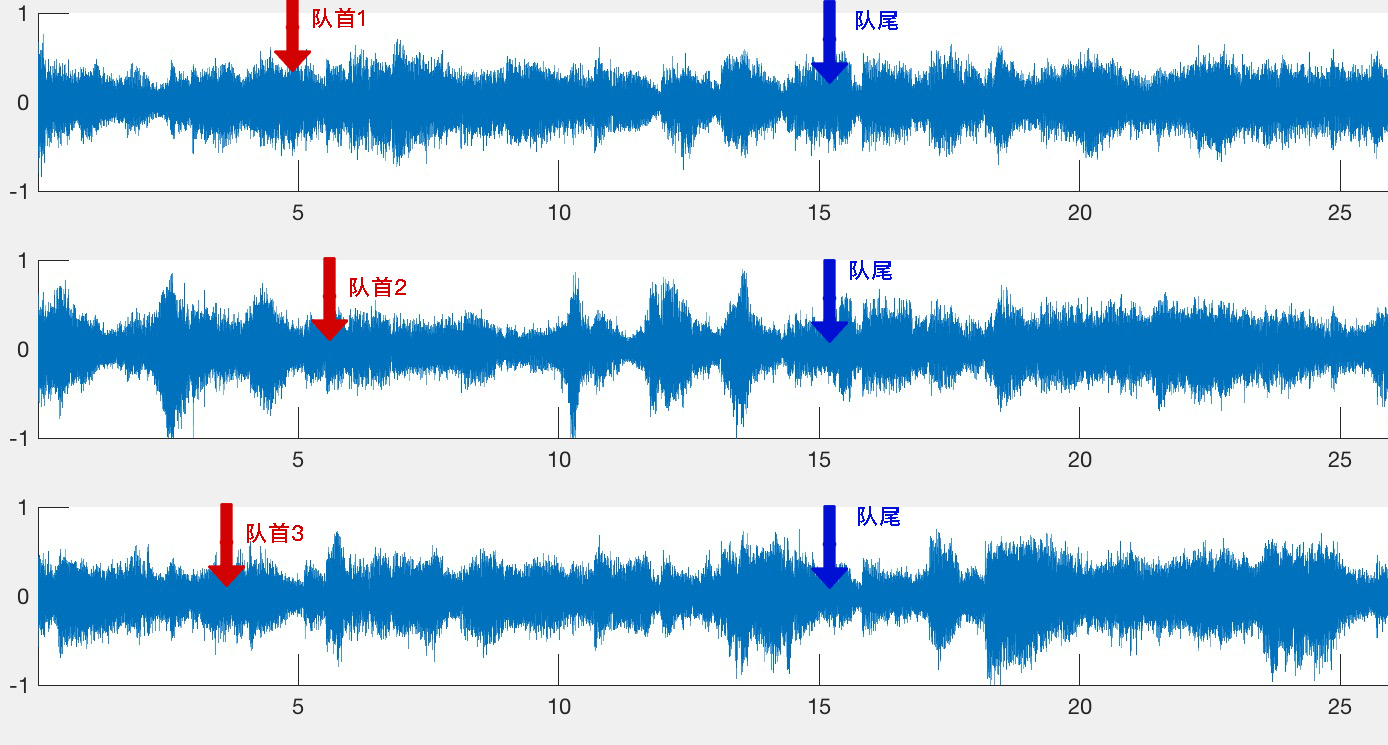
<style>
.page{position:relative;width:1388px;height:745px;background:#f0f0f0}
.page>*{position:absolute;margin:0}
.t1{font:22px "PingFangSC-Medium";letter-spacing:0.025em;color:#d30202}
.t2{font:22px "PingFangSC-Medium";letter-spacing:0.025em;color:#0210d3}
</style>
<div class="page">
<p class="t1" style="left:313px;top:8px;width:51px;height:20px">队首1</p>
<p class="t2" style="left:856px;top:10px;width:42px;height:20px">队尾</p>
<p class="t2" style="left:850px;top:260px;width:42px;height:20px">队尾</p>
<p class="t1" style="left:350px;top:277px;width:56px;height:20px">队首2</p>
<p class="t2" style="left:858px;top:506px;width:42px;height:20px">队尾</p>
<p class="t1" style="left:247px;top:523px;width:56px;height:20px">队首3</p>
</div>
